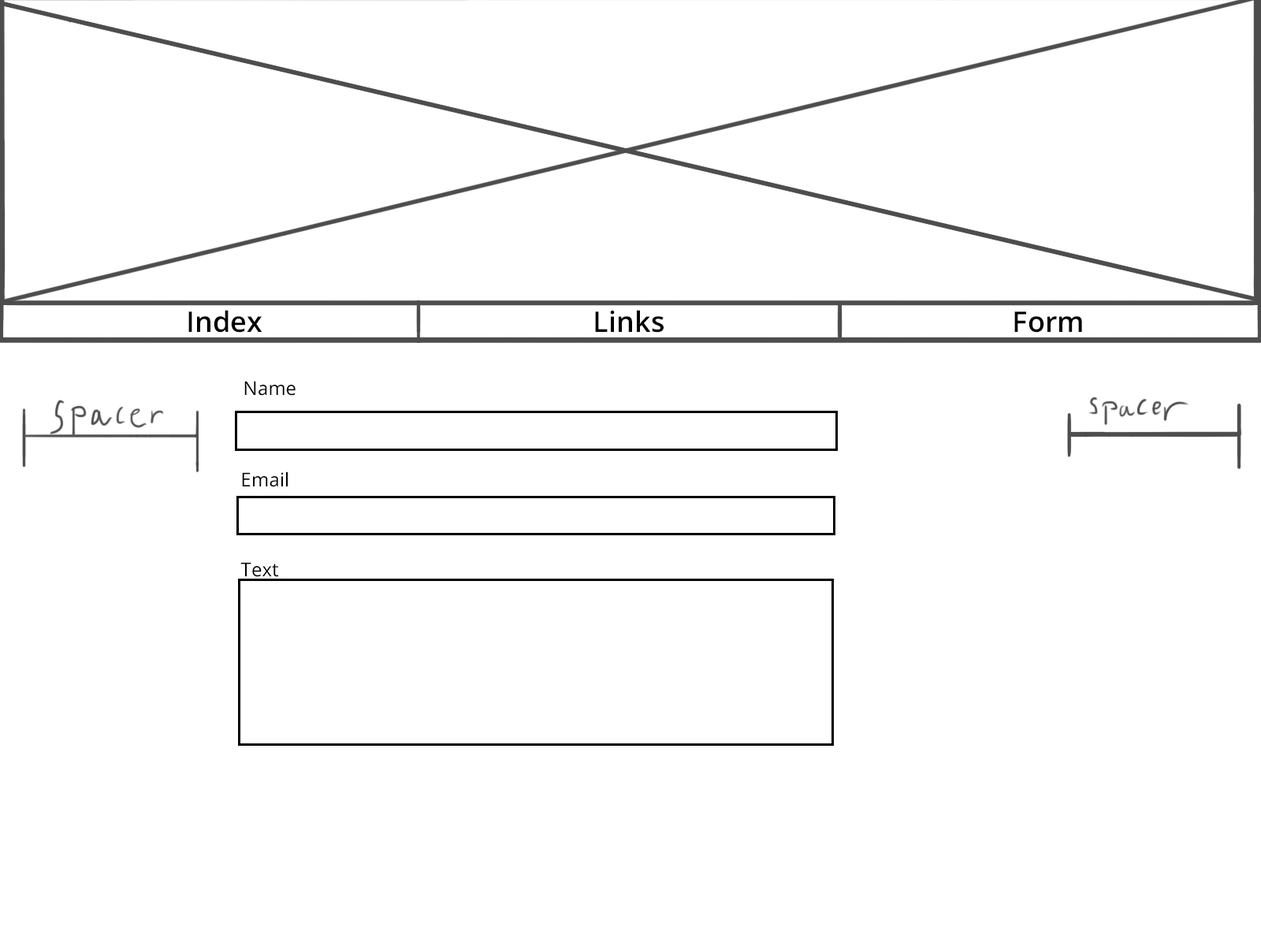
<style>
.page{position:relative;width:1261px;height:946px;background:#ffffff}
.page>*{position:absolute;margin:0}
.t1{font:28.4px "OpenSans-Semibold";letter-spacing:0.005em;color:#000000}
.t2{font:18.9px "OpenSans";letter-spacing:0.005em;color:#000000}
</style>
<div class="page">
<p class="t1" style="left:188px;top:310px;width:74px;height:23px">Index</p>
<p class="t1" style="left:595px;top:310px;width:69px;height:23px">Links</p>
<p class="t1" style="left:1014px;top:311px;width:68px;height:22px">Form</p>
<p class="t2" style="left:244px;top:381px;width:52px;height:15px">Name</p>
<p class="t2" style="left:242px;top:471px;width:46px;height:16px">Email</p>
<p class="t2" style="left:240px;top:562px;width:38px;height:15px">Text</p>
</div>
